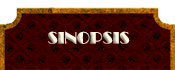
<style>
.page{position:relative;width:175px;height:70px}
.page>*{position:absolute;margin:0}
.t1{font:16.8px "Broadway"}
</style>
<div class="page">
<p class="t1" style="left:48px;top:31px;width:82px;height:13px">SINOPSIS</p>
</div>
